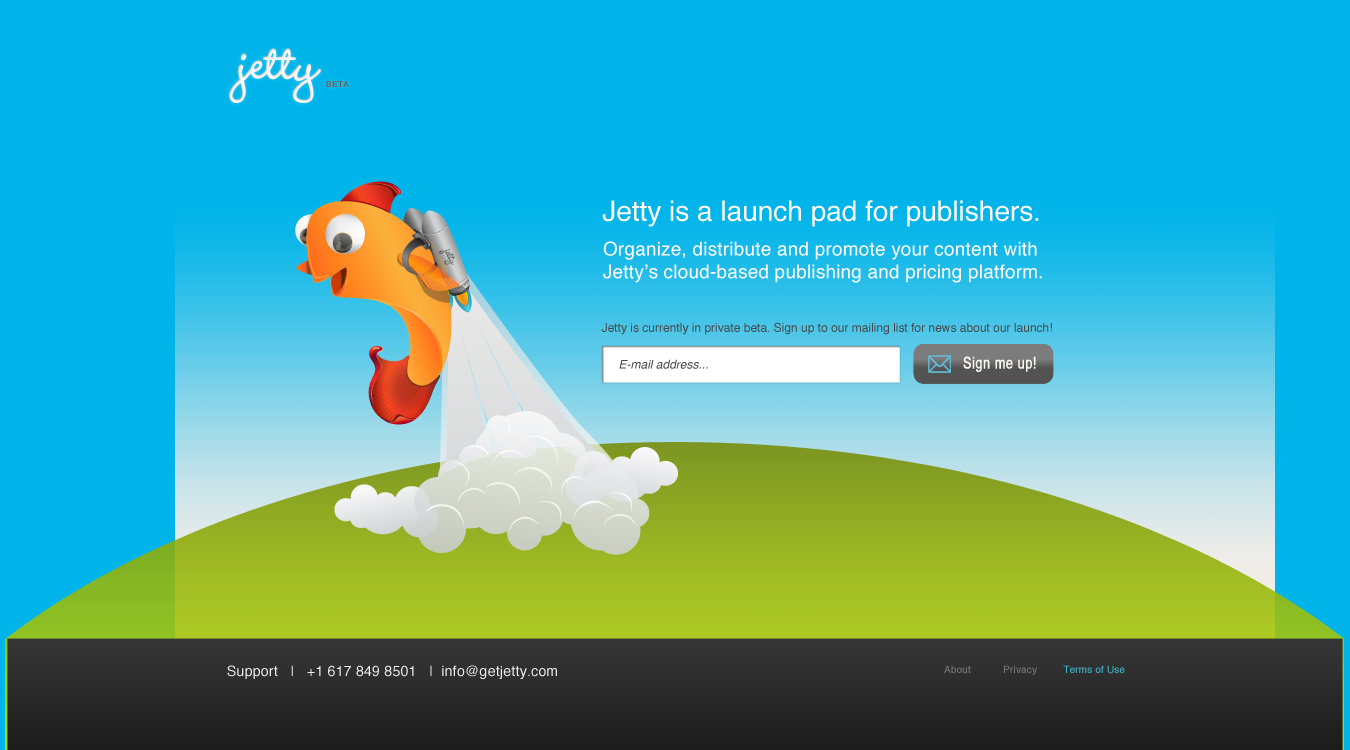
<style>
.page{position:relative;width:1350px;height:750px;background:#00b4e9}
.page>*{position:absolute;margin:0}
.t1{font:66px "WendyLPStd-Bold";letter-spacing:0.015em;color:#fcfcfc}
.t2{font:8px "Helvetica";letter-spacing:0.08em;color:#685a55}
.t3{font:28px "Helvetica";color:#fffcfc}
.t4{font:19px "Helvetica";letter-spacing:0.01em;color:#fffcfc}
.t5{font:12px "Helvetica";color:#484747}
.t6{font:12px "Helvetica-Oblique";color:#484747}
.t7{font:16px "BabelSans";letter-spacing:0.04em;color:#fbf8f3}
.t8{font:14px "Helvetica";letter-spacing:0.02em;color:#eeeeee}
.t9{font:10px "Helvetica";letter-spacing:0.015em;color:#7b7b7b}
.t10{font:10px "Helvetica";letter-spacing:0.015em;color:#40bbd1}
</style>
<div class="page">
<p class="t1" style="left:229px;top:48px;width:92px;height:55px">jetty</p>
<p class="t2" style="left:326px;top:81px;width:23px;height:6px">BETA</p>
<p class="t3" style="left:602px;top:200px;width:437px;height:27px">Jetty is a launch pad for publishers.</p>
<p class="t4" style="left:603px;top:241px;width:439px;height:42px">Organize, distribute and promote your content with Jetty’s cloud-based publishing and pricing platform.</p>
<p class="t5" style="left:601px;top:322px;width:451px;height:13px">Jetty is currently in private beta. Sign up to our mailing list for news about our launch!</p>
<p class="t6" style="left:619px;top:359px;width:89px;height:10px">E-mail address...</p>
<p class="t7" style="left:963px;top:356px;width:73px;height:16px">Sign me up!</p>
<p class="t7" style="left:963px;top:356px;width:73px;height:16px">Sign me up!</p>
<p class="t8" style="left:227px;top:665px;width:330px;height:14px">Support   |   +1 617 849 8501   |  info@getjetty.com</p>
<p class="t9" style="left:944px;top:665px;width:181px;height:10px">About           Privacy         <span class="t10">Terms of Use</span></p>
</div>
